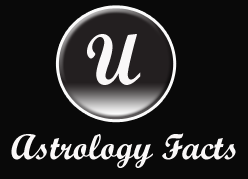
<style>
.page{position:relative;width:248px;height:179px;background:#090909}
.page>*{position:absolute;margin:0}
.t1{font:72px "ScriptMTBold";color:#faf8f8}
.t2{font:36px "ScriptMTBold";color:#faf8f8}
</style>
<div class="page">
<p class="t1" style="left:87px;top:34px;width:54px;height:51px">U</p>
<p class="t2" style="left:11px;top:133px;width:225px;height:35px">Astrology Facts</p>
</div>
